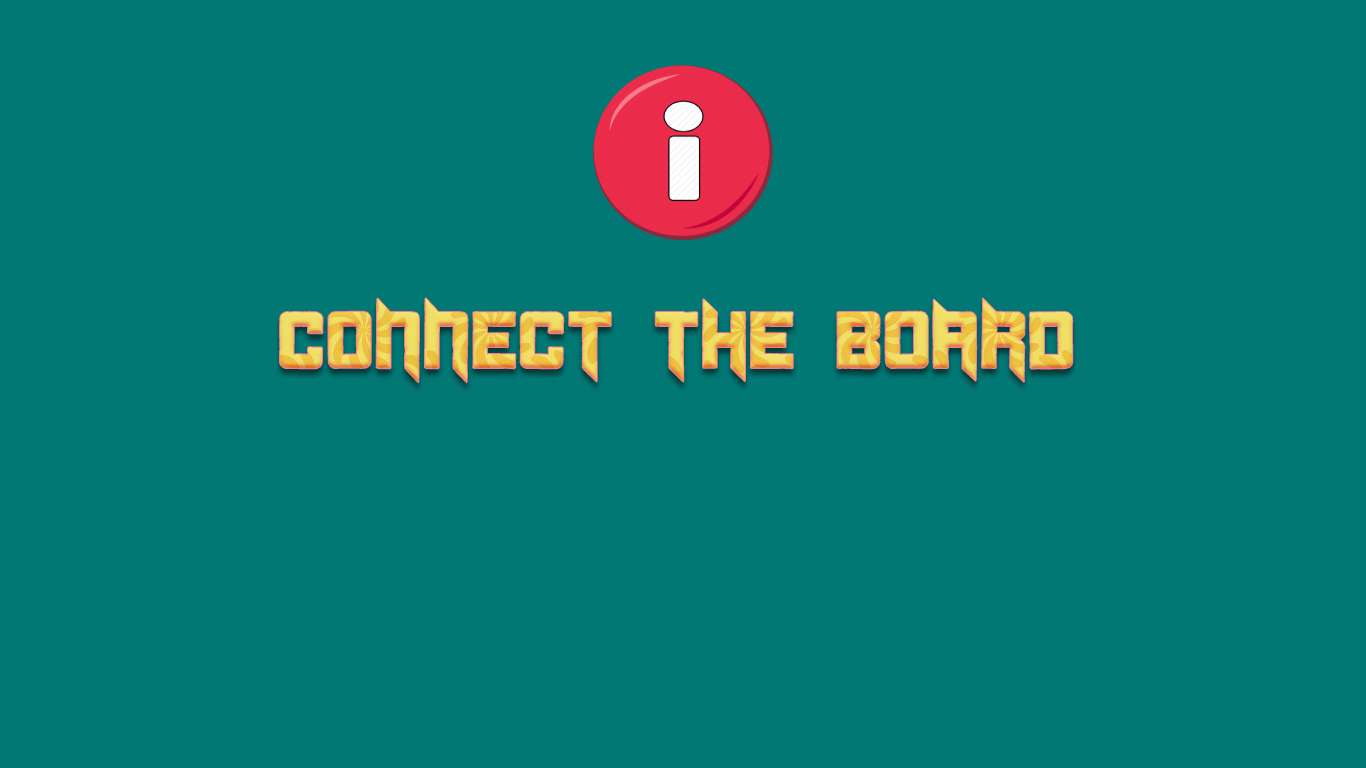
<style>
.page{position:relative;width:1366px;height:768px;background:#017874}
.page>*{position:absolute;margin:0}
.t1{font:80px "Duplexide"}
</style>
<div class="page">
<p class="t1" style="left:279px;top:298px;width:794px;height:85px">CONNECT THE BOARD</p>
</div>
